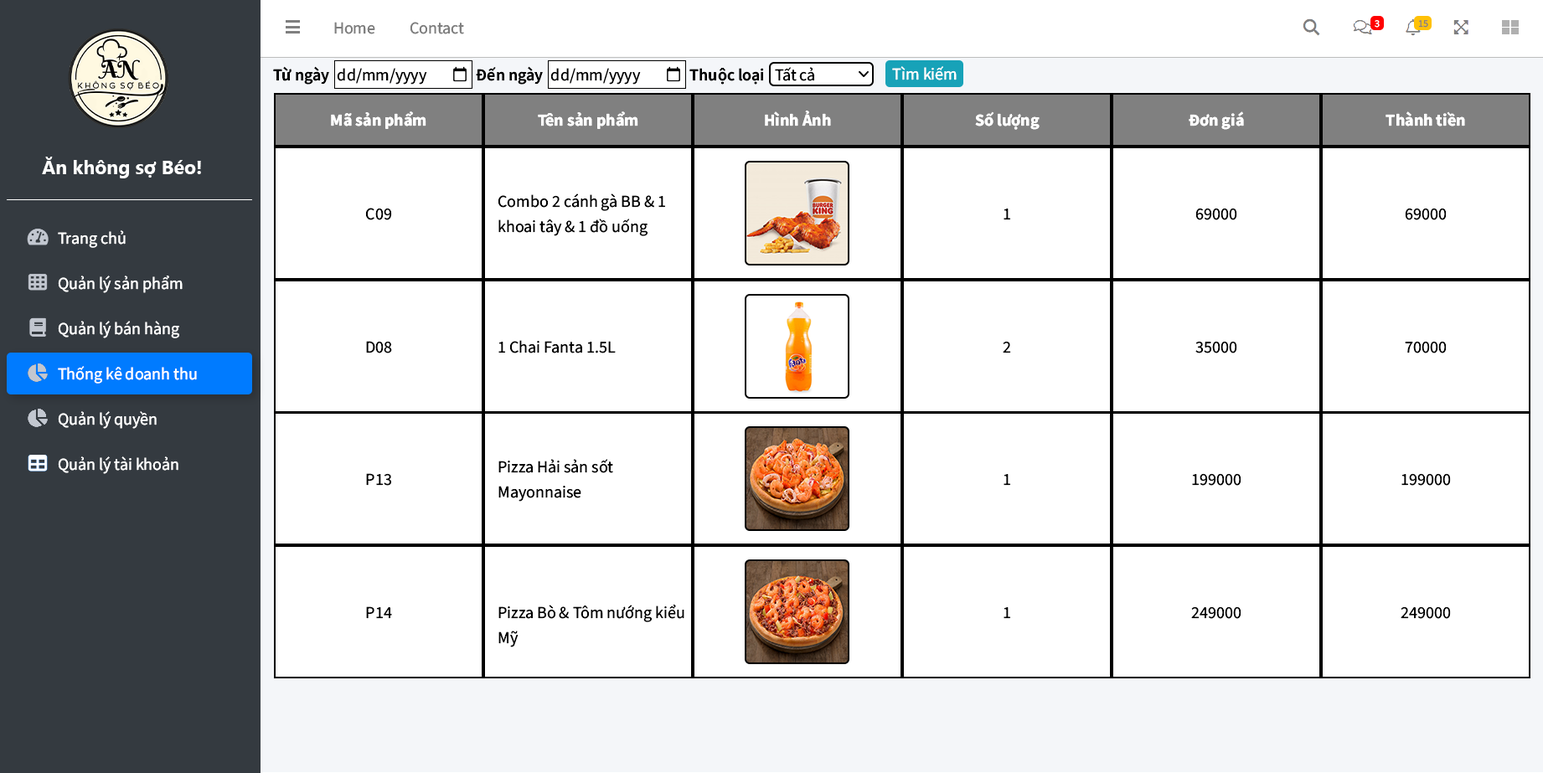
<style>
.page{position:relative;width:1543px;height:773px;background:#ffffff}
.page>*{position:absolute;margin:0}
.t1{font:16.7px "SourceSansRoman-Regular";color:#7f7f7f}
.t2{font:10px "SourceSansRoman-Regular";color:#ffffff}
.t3{font:10px "SourceSansRoman-Regular";color:#857f7f}
.t4{font:16.7px "SourceSansRoman-Semibold";color:#000000}
.t5{font:16.7px "SourceSansRoman-Regular";color:#000000}
.t6{font:16.7px "SourceSansRoman-Regular";color:#ffffff}
.t7{font:16.7px "SourceSansRoman-Bold";color:#ffffff}
.t8{font:19.3px "SegoeUI-Bold";color:#ffffff}
.t9{font:16.7px/25.1px "SourceSansRoman-Regular";color:#000000}
</style>
<div class="page">
<p class="t1" style="left:334px;top:22px;width:41px;height:12px">Home</p>
<p class="t1" style="left:410px;top:22px;width:54px;height:12px">Contact</p>
<p class="t2" style="left:1374px;top:20px;width:5px;height:8px">3</p>
<p class="t3" style="left:1418px;top:20px;width:10px;height:8px">15</p>
<p class="t4" style="left:273px;top:66px;width:56px;height:19px">Từ ngày</p>
<p class="t5" style="left:337px;top:68px;width:90px;height:17px">dd/mm/yyyy</p>
<p class="t4" style="left:476px;top:66px;width:67px;height:19px">Đến ngày</p>
<p class="t5" style="left:550px;top:68px;width:91px;height:17px">dd/mm/yyyy</p>
<p class="t4" style="left:689px;top:68px;width:75px;height:17px">Thuộc loại</p>
<p class="t5" style="left:775px;top:67px;width:39px;height:14px">Tất cả</p>
<p class="t6" style="left:892px;top:66px;width:64px;height:14px">Tìm kiếm</p>
<p class="t7" style="left:331px;top:111px;width:95px;height:18px">Mã sản phẩm</p>
<p class="t7" style="left:538px;top:111px;width:100px;height:18px">Tên sản phẩm</p>
<p class="t7" style="left:765px;top:111px;width:66px;height:15px">Hình Ảnh</p>
<p class="t7" style="left:975px;top:111px;width:64px;height:19px">Số lượng</p>
<p class="t7" style="left:1188px;top:111px;width:56px;height:19px">Đơn giá</p>
<p class="t7" style="left:1385px;top:111px;width:80px;height:15px">Thành tiền</p>
<p class="t8" style="left:42px;top:157px;width:159px;height:21px">Ăn không sợ Béo!</p>
<p class="t9" style="left:497px;top:193px;width:168px;height:43px">Combo 2 cánh gà BB &amp; 1  khoai tây &amp; 1 đồ uống</p>
<p class="t5" style="left:365px;top:208px;width:27px;height:12px">C09</p>
<p class="t5" style="left:1003px;top:209px;width:7px;height:11px">1</p>
<p class="t5" style="left:1195px;top:208px;width:42px;height:12px">69000</p>
<p class="t5" style="left:1404px;top:208px;width:42px;height:12px">69000</p>
<p class="t6" style="left:58px;top:230px;width:68px;height:18px">Trang chủ</p>
<p class="t6" style="left:58px;top:276px;width:125px;height:17px">Quản lý sản phẩm</p>
<p class="t6" style="left:58px;top:321px;width:121px;height:17px">Quản lý bán hàng</p>
<p class="t5" style="left:366px;top:341px;width:26px;height:12px">D08</p>
<p class="t5" style="left:498px;top:340px;width:118px;height:13px">1 Chai Fanta 1.5L</p>
<p class="t5" style="left:1002px;top:341px;width:9px;height:12px">2</p>
<p class="t5" style="left:1195px;top:341px;width:42px;height:12px">35000</p>
<p class="t5" style="left:1404px;top:341px;width:42px;height:12px">70000</p>
<p class="t6" style="left:58px;top:366px;width:139px;height:18px">Thống kê doanh thu</p>
<p class="t6" style="left:58px;top:411px;width:99px;height:18px">Quản lý quyền</p>
<p class="t6" style="left:58px;top:456px;width:120px;height:18px">Quản lý tài khoản</p>
<p class="t9" style="left:498px;top:459px;width:115px;height:43px">Pizza Hải sản sốt Mayonnaise</p>
<p class="t5" style="left:366px;top:473px;width:25px;height:13px">P13</p>
<p class="t5" style="left:1192px;top:473px;width:49px;height:13px">199000</p>
<p class="t5" style="left:1401px;top:473px;width:50px;height:13px">199000</p>
<p class="t5" style="left:1003px;top:474px;width:7px;height:12px">1</p>
<p class="t9" style="left:498px;top:605px;width:186px;height:42px">Pizza Bò &amp; Tôm nướng kiểu Mỹ</p>
<p class="t5" style="left:366px;top:606px;width:26px;height:13px">P14</p>
<p class="t5" style="left:1003px;top:607px;width:7px;height:12px">1</p>
<p class="t5" style="left:1191px;top:606px;width:50px;height:13px">249000</p>
<p class="t5" style="left:1400px;top:606px;width:51px;height:13px">249000</p>
</div>
